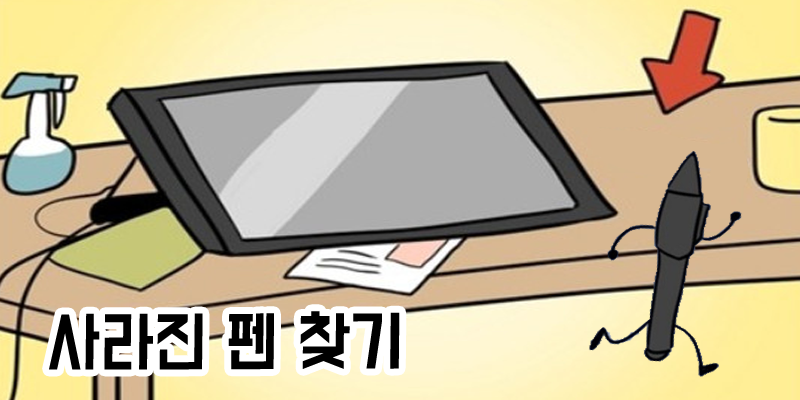
<style>
.page{position:relative;width:800px;height:400px}
.page>*{position:absolute;margin:0}
.t1{font:59px "BMDoHyeon";color:#000000;scale:0.95 1}
</style>
<div class="page">
<p class="t1" style="left:49px;top:311px;width:351px;height:59px">사라진 펜 찾기</p>
</div>
